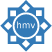
<style>
.page{position:relative;width:52px;height:52px;background:#ffffff}
.page>*{position:absolute;margin:0}
.t1{font:8.6px "Audiowide-Regular"}
</style>
<div class="page">
<p class="t1" style="left:17px;top:21px;width:19px;height:8px">hmv</p>
</div>
